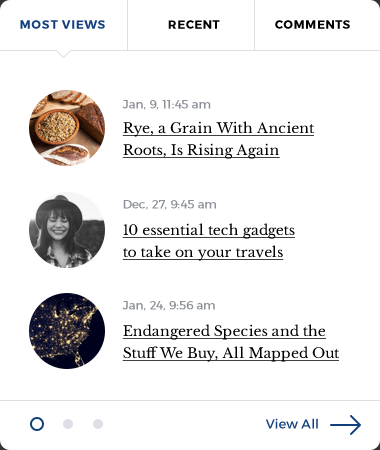
<style>
.page{position:relative;width:380px;height:450px;background:#ffffff}
.page>*{position:absolute;margin:0}
.t1{font:12px "Montserrat-Bold";letter-spacing:0.05em;color:#12407e;text-transform:uppercase}
.t2{font:12px "Montserrat-Bold";letter-spacing:0.05em;color:#000000;text-transform:uppercase}
.t3{font:12px "Montserrat-Regular";color:#8c9199}
.t4{font:14px/22px "LibreBaskerville-Regular";color:#000000;text-decoration:underline}
.t5{font:13px "Montserrat-Regular";color:#12407e}
</style>
<div class="page">
<p class="t1" style="left:20px;top:20px;width:85px;height:9px">Most Views</p>
<p class="t2" style="left:168px;top:20px;width:52px;height:9px">Recent</p>
<p class="t2" style="left:275px;top:20px;width:75px;height:9px">Comments</p>
<p class="t3" style="left:122px;top:100px;width:89px;height:10px">Jan, 9, 11:45 am</p>
<p class="t4" style="left:122px;top:121px;width:193px;height:38px">Rye, a Grain With Ancient<br>Roots, Is Rising Again</p>
<p class="t3" style="left:123px;top:200px;width:93px;height:10px">Dec, 27, 9:45 am</p>
<p class="t4" style="left:122px;top:223px;width:173px;height:38px">10 essential tech gadgets<br>to take on your travels</p>
<p class="t3" style="left:122px;top:301px;width:93px;height:10px">Jan, 24, 9:56 am</p>
<p class="t4" style="left:122px;top:324px;width:218px;height:38px">Endangered Species and the<br>Stuff We Buy, All Mapped Out</p>
<p class="t5" style="left:265px;top:418px;width:53px;height:11px">View All</p>
</div>
